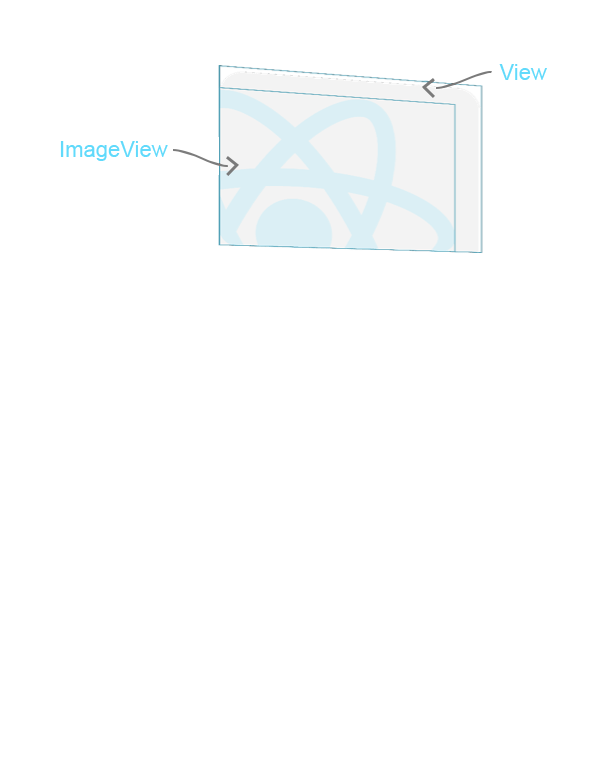
<style>
.page{position:relative;width:602px;height:776px;background:#ffffff}
.page>*{position:absolute;margin:0}
.t1{font:22px "ArialMT";color:#61dafb}
</style>
<div class="page">
<p class="t1" style="left:499px;top:64px;width:48px;height:16px">View</p>
<p class="t1" style="left:60px;top:141px;width:108px;height:20px">ImageView</p>
</div>
